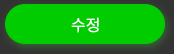
<style>
.page{position:relative;width:174px;height:54px;background:#00cc00}
.page>*{position:absolute;margin:0}
.t1{font:16px "NotoSansKR-Regular";color:#ffffff}
</style>
<div class="page">
<p class="t1" style="left:71px;top:17px;width:28px;height:16px">수정</p>
</div>
